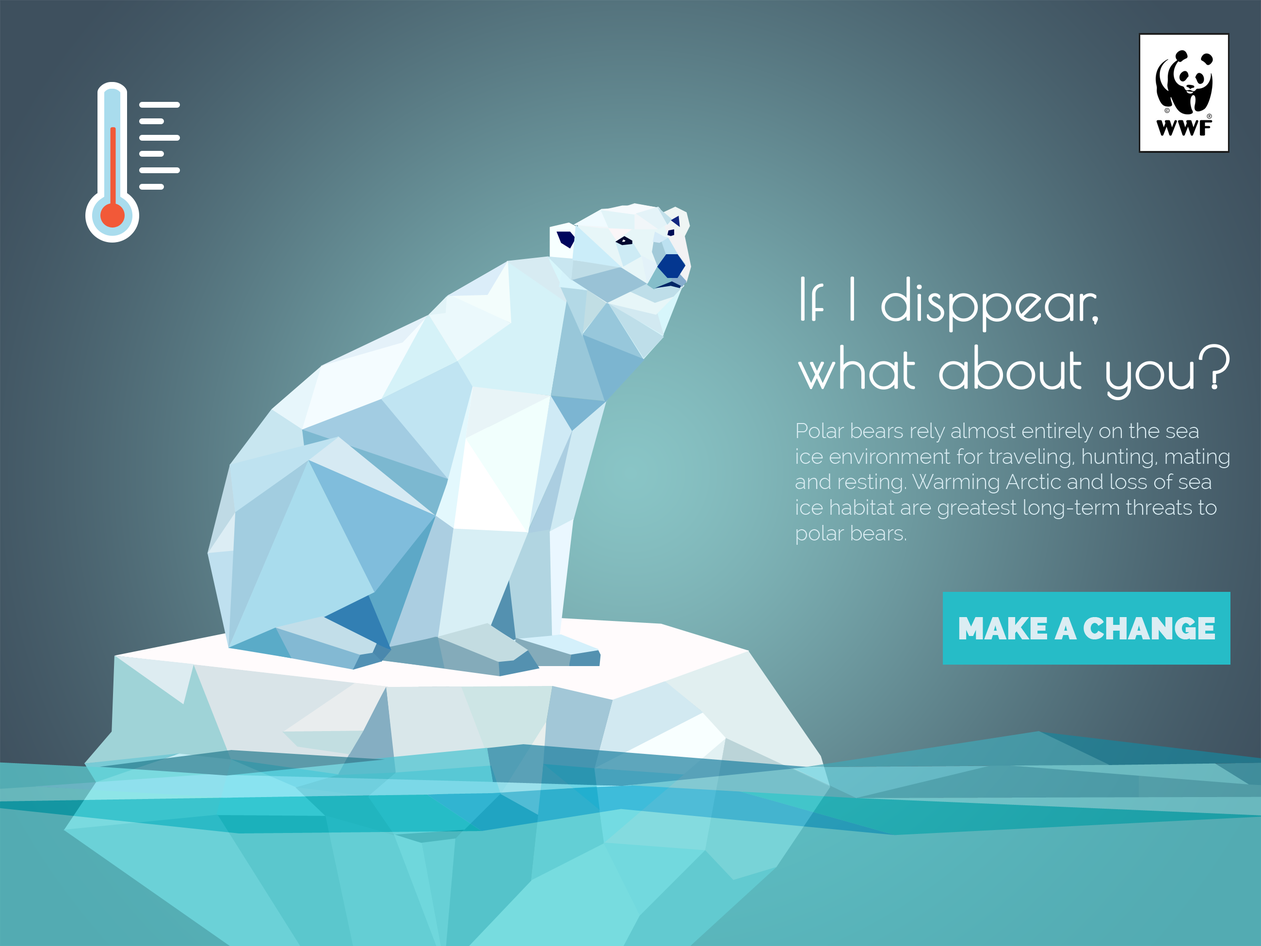
<style>
.page{position:relative;width:1261px;height:946px}
.page>*{position:absolute;margin:0}
.t1{font:56.5px "PoiretOne-Regular";color:#ffffff;font-weight:bold}
.t2{font:21.3px "Raleway-Light";color:#dbedf3}
.t3{font:30.9px "Raleway-Heavy";color:#dbedf3;text-transform:uppercase;font-weight:bold}
</style>
<div class="page">
<p class="t1" style="left:798px;top:276px;width:432px;height:124px">If I disppear,<br>what about you?</p>
<p class="t2" style="left:795px;top:422px;width:434px;height:123px">Polar bears rely almost entirely on the sea ice environment for traveling, hunting, mating and resting. Warming Arctic and loss of sea ice habitat are greatest long-term threats to polar bears.</p>
<p class="t3" style="left:959px;top:617px;width:256px;height:22px">Make a Change</p>
</div>
